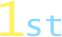
<style>
.page{position:relative;width:62px;height:37px;background:#ffffff}
.page>*{position:absolute;margin:0}
.t1{font:32px "LucidaSans-Typewriter"}
.t2{font:48px "LucidaSans-Typewriter"}
</style>
<div class="page">
<p class="t1" style="left:0px;top:0px;width:62px;height:37px"><span class="t2">1</span>st</p>
</div>
